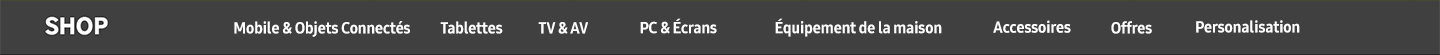
<style>
.page{position:relative;width:1440px;height:55px;background:#404040}
.page>*{position:absolute;margin:0}
.t1{font:16px "SamsungOne-800C";color:#ffffff}
</style>
<div class="page">
<p class="t1" style="left:234px;top:21px;width:176px;height:16px">Mobile &amp; Objets Connectés</p>
<p class="t1" style="left:440px;top:21px;width:63px;height:13px">Tablettes</p>
<p class="t1" style="left:538px;top:22px;width:50px;height:12px">TV &amp; AV</p>
<p class="t1" style="left:640px;top:18px;width:77px;height:16px">PC &amp; Écrans</p>
<p class="t1" style="left:775px;top:18px;width:167px;height:19px">Équipement de la maison</p>
<p class="t1" style="left:993px;top:20px;width:78px;height:13px">Accessoires</p>
<p class="t1" style="left:1111px;top:21px;width:41px;height:13px">Offres</p>
<p class="t1" style="left:1196px;top:20px;width:104px;height:13px">Personalisation</p>
</div>
